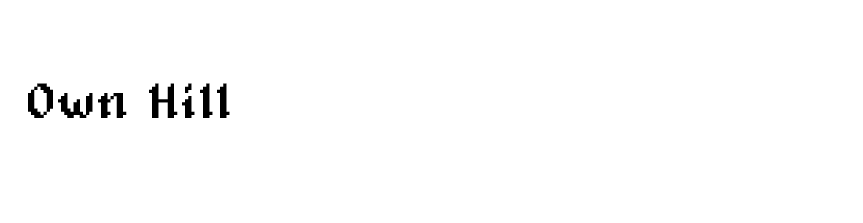
<style>
.page{position:relative;width:863px;height:223px;background:#ffffff}
.page>*{position:absolute;margin:0}
.t1{font:50px "Alagard";letter-spacing:0.04em;color:#000000}
</style>
<div class="page">
<p class="t1" style="left:28px;top:83px;width:202px;height:35px">Own Hill</p>
</div>
